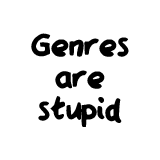
<style>
.page{position:relative;width:160px;height:160px;background:#ffffff}
.page>*{position:absolute;margin:0}
.t1{font:35.9px/31.9px "QAReports";color:#000000}
</style>
<div class="page">
<p class="t1" style="left:31px;top:33px;width:98px;height:94px;text-align:center">Genres<br>are<br>stupid</p>
</div>
